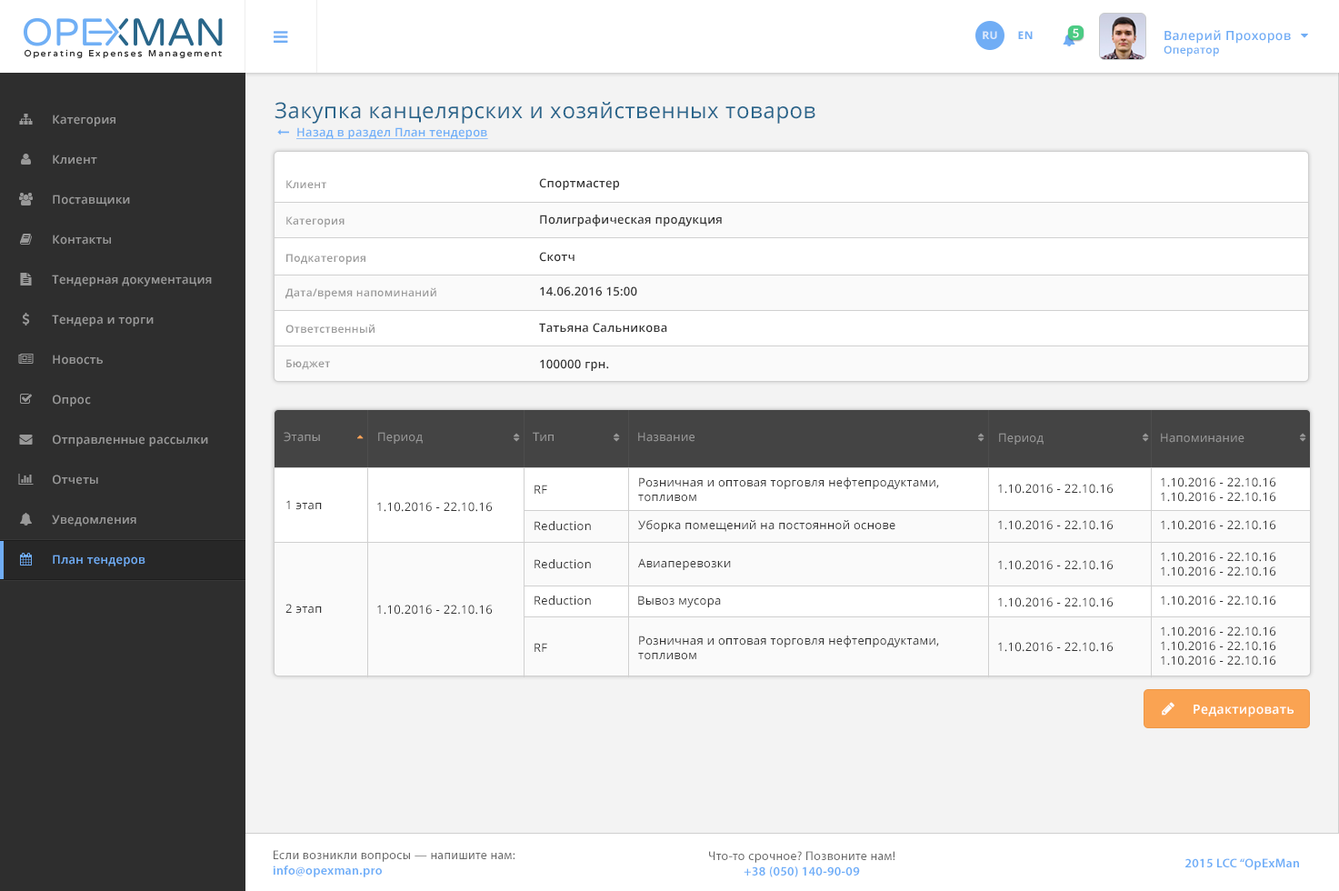
<style>
.page{position:relative;width:1339px;height:891px;background:#ffffff}
.page>*{position:absolute;margin:0}
.t1{font:11.8px "OpenSans-Semibold";letter-spacing:0.025em;color:#ffffff}
.t2{font:12.7px "OpenSans-Semibold";letter-spacing:0.025em;color:#70adf5}
.t3{font:10.9px "OpenSans-Semibold";letter-spacing:0.025em;color:#70adf5}
.t4{font:10.9px "OpenSans-Bold";letter-spacing:0.025em;color:#dbe8fc;text-transform:uppercase}
.t5{font:10.9px "OpenSans-Bold";letter-spacing:0.025em;color:#70adf5;text-transform:uppercase}
.t6{font:21.8px "OpenSans";letter-spacing:0.025em;color:#29658b}
.t7{font:11.8px "OpenSans-Semibold";letter-spacing:0.025em;color:#999999}
.t8{font:11.8px "OpenSans-Semibold";letter-spacing:0.025em;color:#6faff8;text-decoration:underline}
.t9{font:10.9px "OpenSans-Semibold";letter-spacing:0.025em;color:#999999}
.t10{font:11.8px "OpenSans-Semibold";letter-spacing:0.025em;color:#333333}
.t11{font:11.8px "OpenSans";letter-spacing:0.025em;color:#999999}
.t12{font:11.8px "OpenSans";letter-spacing:0.025em;color:#333333}
.t13{font:11.8px "OpenSans-Semibold";letter-spacing:0.025em;color:#70adf5}
.t14{font:12.7px "OpenSans-Semibold";letter-spacing:0.025em;color:#ffffff}
.t15{font:12.7px "MyriadPro-Regular";letter-spacing:0.025em;color:#696969}
.t16{font:12.7px "MyriadPro-Semibold";letter-spacing:0.025em;color:#6eaef8}
</style>
<div class="page">
<p class="t1" style="left:1072px;top:28px;width:7px;height:10px">5</p>
<p class="t2" style="left:1163px;top:30px;width:128px;height:26px">Валерий Прохоров<br><span class="t3">Оператор</span></p>
<p class="t4" style="left:982px;top:31px;width:15px;height:8px">Ru</p>
<p class="t5" style="left:1018px;top:31px;width:14px;height:8px">EN</p>
<p class="t6" style="left:274px;top:102px;width:541px;height:22px">Закупка канцелярских и хозяйственных товаров</p>
<p class="t7" style="left:53px;top:115px;width:62px;height:11px">Категория</p>
<p class="t8" style="left:296px;top:127px;width:192px;height:12px">Назад в раздел План тендеров</p>
<p class="t7" style="left:53px;top:155px;width:44px;height:10px">Клиент</p>
<p class="t9" style="left:286px;top:180px;width:40px;height:8px">Клиент</p>
<p class="t10" style="left:539px;top:178px;width:80px;height:12px">Спортмастер</p>
<p class="t7" style="left:53px;top:194px;width:77px;height:12px">Поставщики</p>
<p class="t9" style="left:286px;top:216px;width:58px;height:11px">Категория</p>
<p class="t10" style="left:540px;top:214px;width:182px;height:12px">Полиграфическая продукция</p>
<p class="t7" style="left:53px;top:234px;width:58px;height:10px">Контакты</p>
<p class="t9" style="left:286px;top:254px;width:79px;height:10px">Подкатегория</p>
<p class="t10" style="left:539px;top:252px;width:35px;height:10px">Скотч</p>
<p class="t7" style="left:52px;top:274px;width:160px;height:12px">Тендерная документация</p>
<p class="t9" style="left:285px;top:287px;width:151px;height:12px">Дата/время напоминаний</p>
<p class="t10" style="left:540px;top:286px;width:97px;height:10px">14.06.2016 15:00</p>
<p class="t7" style="left:52px;top:314px;width:102px;height:12px">Тендера и торги</p>
<p class="t9" style="left:285px;top:324px;width:89px;height:9px">Ответственный</p>
<p class="t10" style="left:539px;top:323px;width:128px;height:10px">Татьяна Сальникова</p>
<p class="t7" style="left:53px;top:354px;width:50px;height:10px">Новость</p>
<p class="t9" style="left:286px;top:359px;width:44px;height:11px">Бюджет</p>
<p class="t10" style="left:540px;top:359px;width:69px;height:12px">100000 грн.</p>
<p class="t7" style="left:53px;top:394px;width:38px;height:12px">Опрос</p>
<p class="t7" style="left:53px;top:434px;width:155px;height:12px">Отправленные рассылки</p>
<p class="t11" style="left:284px;top:432px;width:36px;height:10px">Этапы</p>
<p class="t11" style="left:378px;top:432px;width:45px;height:12px">Период</p>
<p class="t11" style="left:533px;top:432px;width:21px;height:9px">Тип</p>
<p class="t11" style="left:638px;top:432px;width:56px;height:10px">Название</p>
<p class="t11" style="left:999px;top:433px;width:44px;height:11px">Период</p>
<p class="t11" style="left:1161px;top:433px;width:83px;height:10px">Напоминание</p>
<p class="t7" style="left:53px;top:474px;width:45px;height:10px">Отчеты</p>
<p class="t12" style="left:534px;top:484px;width:13px;height:10px">RF</p>
<p class="t12" style="left:638px;top:477px;width:301px;height:25px">Розничная и оптовая торговля нефтепродуктами, <br>топливом</p>
<p class="t12" style="left:998px;top:484px;width:114px;height:10px">1.10.2016 - 22.10.16</p>
<p class="t12" style="left:1161px;top:477px;width:114px;height:25px">1.10.2016 - 22.10.16<br>1.10.2016 - 22.10.16</p>
<p class="t12" style="left:286px;top:500px;width:36px;height:10px">1 этап</p>
<p class="t12" style="left:377px;top:502px;width:115px;height:10px">1.10.2016 - 22.10.16</p>
<p class="t7" style="left:52px;top:514px;width:84px;height:12px">Уведомления</p>
<p class="t12" style="left:534px;top:521px;width:57px;height:10px">Reduction</p>
<p class="t12" style="left:638px;top:520px;width:257px;height:12px">Уборка помещений на постоянной основе</p>
<p class="t12" style="left:998px;top:520px;width:114px;height:10px">1.10.2016 - 22.10.16</p>
<p class="t12" style="left:1161px;top:520px;width:114px;height:10px">1.10.2016 - 22.10.16</p>
<p class="t13" style="left:53px;top:554px;width:92px;height:12px">План тендеров</p>
<p class="t12" style="left:1161px;top:552px;width:114px;height:24px">1.10.2016 - 22.10.16<br>1.10.2016 - 22.10.16</p>
<p class="t12" style="left:534px;top:559px;width:57px;height:10px">Reduction</p>
<p class="t12" style="left:638px;top:558px;width:93px;height:12px">Авиаперевозки</p>
<p class="t12" style="left:998px;top:560px;width:114px;height:10px">1.10.2016 - 22.10.16</p>
<p class="t12" style="left:285px;top:603px;width:37px;height:10px">2 этап</p>
<p class="t12" style="left:377px;top:604px;width:115px;height:10px">1.10.2016 - 22.10.16</p>
<p class="t12" style="left:534px;top:595px;width:57px;height:10px">Reduction</p>
<p class="t12" style="left:638px;top:595px;width:83px;height:12px">Вывоз мусора</p>
<p class="t12" style="left:998px;top:597px;width:114px;height:10px">1.10.2016 - 22.10.16</p>
<p class="t12" style="left:1161px;top:595px;width:114px;height:10px">1.10.2016 - 22.10.16</p>
<p class="t12" style="left:1161px;top:626px;width:114px;height:39px">1.10.2016 - 22.10.16<br>1.10.2016 - 22.10.16<br>1.10.2016 - 22.10.16</p>
<p class="t12" style="left:638px;top:635px;width:301px;height:25px">Розничная и оптовая торговля нефтепродуктами,<br>топливом</p>
<p class="t12" style="left:998px;top:642px;width:114px;height:10px">1.10.2016 - 22.10.16</p>
<p class="t12" style="left:534px;top:643px;width:13px;height:9px">RF</p>
<p class="t14" style="left:1193px;top:704px;width:100px;height:13px">Редактировать</p>
<p class="t15" style="left:273px;top:850px;width:242px;height:27px">Если возникли вопросы — напишите нам:<br><span class="t16">info@opexman.pro</span></p>
<p class="t15" style="left:709px;top:851px;width:186px;height:26px;text-align:center">Что-то срочное? Позвоните нам!<br><span class="t16">+38 (050) 140-90-09</span></p>
<p class="t16" style="left:1185px;top:858px;width:114px;height:12px">2015 LCC “OpExMan</p>
</div>
